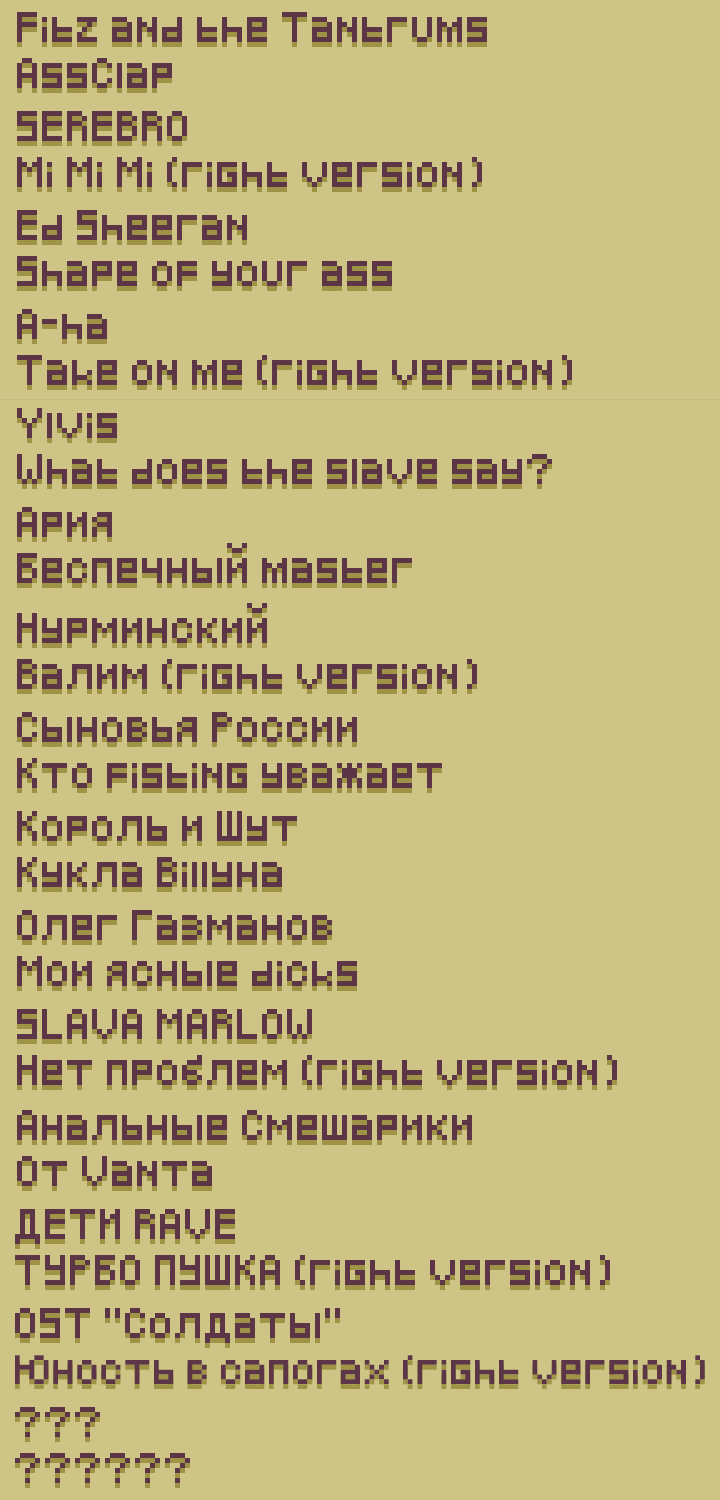
<style>
.page{position:relative;width:720px;height:1500px;background:#cdc485}
.page>*{position:absolute;margin:0}
.t1{font:25px/45.8px "Pixeled";color:#5c3546}
.t2{font:24px/45.8px "Pixeled";color:#5c3546}
</style>
<div class="page">
<p class="t1" style="left:17px;top:12px;width:470px;height:76px">Fitz and the Tantrums<br>AssClap</p>
<p class="t1" style="left:17px;top:111px;width:465px;height:76px">SEREBRO<br>Mi Mi Mi (right version)</p>
<p class="t1" style="left:17px;top:210px;width:375px;height:76px">Ed Sheeran<br>Shape of your ass</p>
<p class="t1" style="left:17px;top:309px;width:555px;height:76px">A-ha<br>Take on me (right version)</p>
<p class="t1" style="left:17px;top:408px;width:535px;height:76px">Ylvis<br>What does the slave say?</p>
<p class="t1" style="left:17px;top:507px;width:395px;height:76px">Ария<br>Беспечный master</p>
<p class="t1" style="left:17px;top:603px;width:460px;height:86px">Нурминский<br>Валим (right version)</p>
<p class="t1" style="left:17px;top:712px;width:425px;height:76px">Сыновья России<br>Кто fisting уважает</p>
<p class="t1" style="left:17px;top:811px;width:280px;height:76px">Король и Шут<br>Кукла Billyна</p>
<p class="t1" style="left:17px;top:910px;width:340px;height:76px">Олег Газманов<br>Мои ясные dicks</p>
<p class="t1" style="left:17px;top:1009px;width:600px;height:76px">SLAVA MARLOW<br>Нет проблем (right version)</p>
<p class="t1" style="left:17px;top:1110px;width:455px;height:76px">Анальные Смешарики<br>От Vanта</p>
<p class="t1" style="left:15px;top:1209px;width:595px;height:76px">ДЕТИ RAVE<br>ТУРБО ПУШКА (right version)</p>
<p class="t2" style="left:15px;top:1308px;width:690px;height:76px"><span class="t1">OST "Солдаты"<br></span>Юность в сапогах (right version)</p>
<p class="t1" style="left:15px;top:1407px;width:175px;height:76px">???<br>??????</p>
</div>
